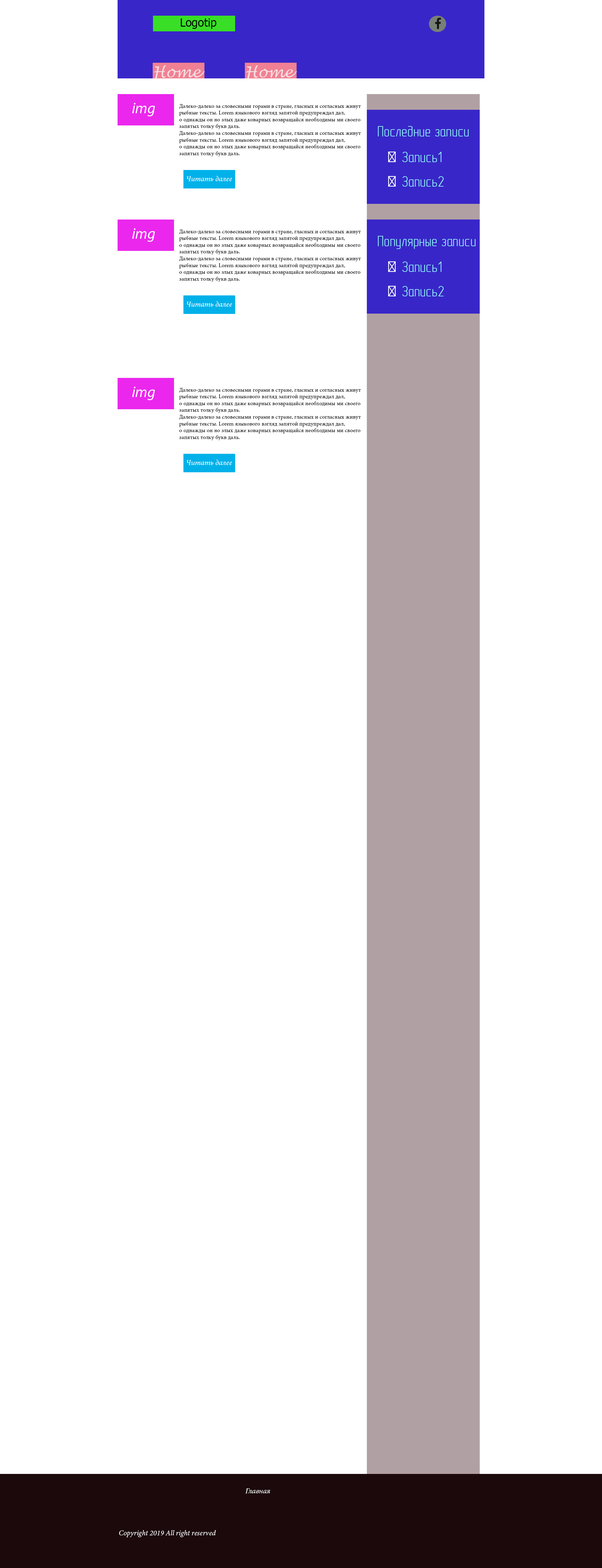
<style>
.page{position:relative;width:602px;height:1568px;background:#ffffff}
.page>*{position:absolute;margin:0}
.t1{font:11.3px "Tahoma";color:#000000}
.t2{font:15.1px "LucidaHandwriting-Italic";color:#f6dde1}
.t3{font:15.1px "MyriadPro-It";color:#ffffff}
.t4{font:5.6px "MinionPro-Regular";color:#000000}
.t5{font:15.1px "GOSTTypeA";color:#8ff2f6}
.t6{font:7.5px "MinionPro-It";color:#ffffff}
</style>
<div class="page">
<p class="t1" style="left:181px;top:19px;width:35px;height:10px">Logotip</p>
<p class="t2" style="left:154px;top:65px;width:51px;height:13px">Home</p>
<p class="t2" style="left:246px;top:65px;width:51px;height:13px">Home</p>
<p class="t3" style="left:132px;top:103px;width:23px;height:13px">img</p>
<p class="t4" style="left:179px;top:104px;width:182px;height:52px">Далеко-далеко за словесными горами в стране, гласных и согласных живут <br>рыбные тексты. Lorem языкового взгляд запятой предупреждал дал, <br>о однажды он но злых даже коварных возвращайся необходимы ми своего <br>запятых толку букв даль. <br>Далеко-далеко за словесными горами в стране, гласных и согласных живут <br>рыбные тексты. Lorem языкового взгляд запятой предупреждал дал, <br>о однажды он но злых даже коварных возвращайся необходимы ми своего <br>запятых толку букв даль.</p>
<p class="t5" style="left:378px;top:126px;width:91px;height:10px">Последние записи</p>
<p class="t5" style="left:402px;top:152px;width:40px;height:10px">Запись1</p>
<p class="t6" style="left:187px;top:176px;width:45px;height:6px">Читать далее</p>
<p class="t5" style="left:402px;top:176px;width:42px;height:11px">Запись2</p>
<p class="t3" style="left:132px;top:228px;width:23px;height:14px">img</p>
<p class="t4" style="left:179px;top:230px;width:182px;height:52px">Далеко-далеко за словесными горами в стране, гласных и согласных живут <br>рыбные тексты. Lorem языкового взгляд запятой предупреждал дал, <br>о однажды он но злых даже коварных возвращайся необходимы ми своего <br>запятых толку букв даль. <br>Далеко-далеко за словесными горами в стране, гласных и согласных живут <br>рыбные тексты. Lorem языкового взгляд запятой предупреждал дал, <br>о однажды он но злых даже коварных возвращайся необходимы ми своего <br>запятых толку букв даль.</p>
<p class="t5" style="left:378px;top:236px;width:98px;height:13px">Популярные записи</p>
<p class="t5" style="left:402px;top:262px;width:40px;height:10px">Запись1</p>
<p class="t5" style="left:402px;top:286px;width:42px;height:10px">Запись2</p>
<p class="t6" style="left:187px;top:301px;width:45px;height:6px">Читать далее</p>
<p class="t3" style="left:132px;top:387px;width:23px;height:13px">img</p>
<p class="t4" style="left:179px;top:388px;width:182px;height:52px">Далеко-далеко за словесными горами в стране, гласных и согласных живут <br>рыбные тексты. Lorem языкового взгляд запятой предупреждал дал, <br>о однажды он но злых даже коварных возвращайся необходимы ми своего <br>запятых толку букв даль. <br>Далеко-далеко за словесными горами в стране, гласных и согласных живут <br>рыбные тексты. Lorem языкового взгляд запятой предупреждал дал, <br>о однажды он но злых даже коварных возвращайся необходимы ми своего <br>запятых толку букв даль.</p>
<p class="t6" style="left:187px;top:459px;width:45px;height:6px">Читать далее</p>
<p class="t6" style="left:245px;top:1488px;width:26px;height:6px">Главная</p>
<p class="t6" style="left:119px;top:1530px;width:97px;height:7px">Copyright 2019 All right reserved</p>
</div>
